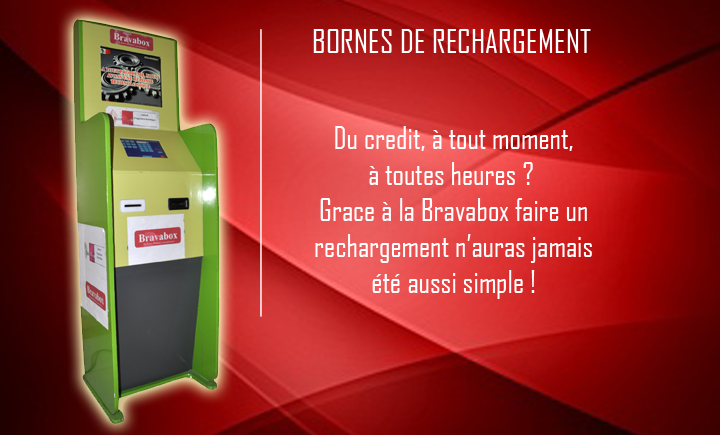
<style>
.page{position:relative;width:720px;height:435px}
.page>*{position:absolute;margin:0}
.t1{font:31.9px "AgencyFB-Reg";color:#ffffff}
.t2{font:30px "AgencyFB-Reg";color:#ffffff}
</style>
<div class="page">
<p class="t1" style="left:313px;top:29px;width:278px;height:24px">BORNES DE RECHARGEMENT</p>
<p class="t2" style="left:315px;top:126px;width:277px;height:173px;text-align:center">Du credit, à tout moment,<br>à toutes heures ? <br>Grace à la Bravabox faire un<br>rechargement n’auras jamais<br>été aussi simple !</p>
</div>
